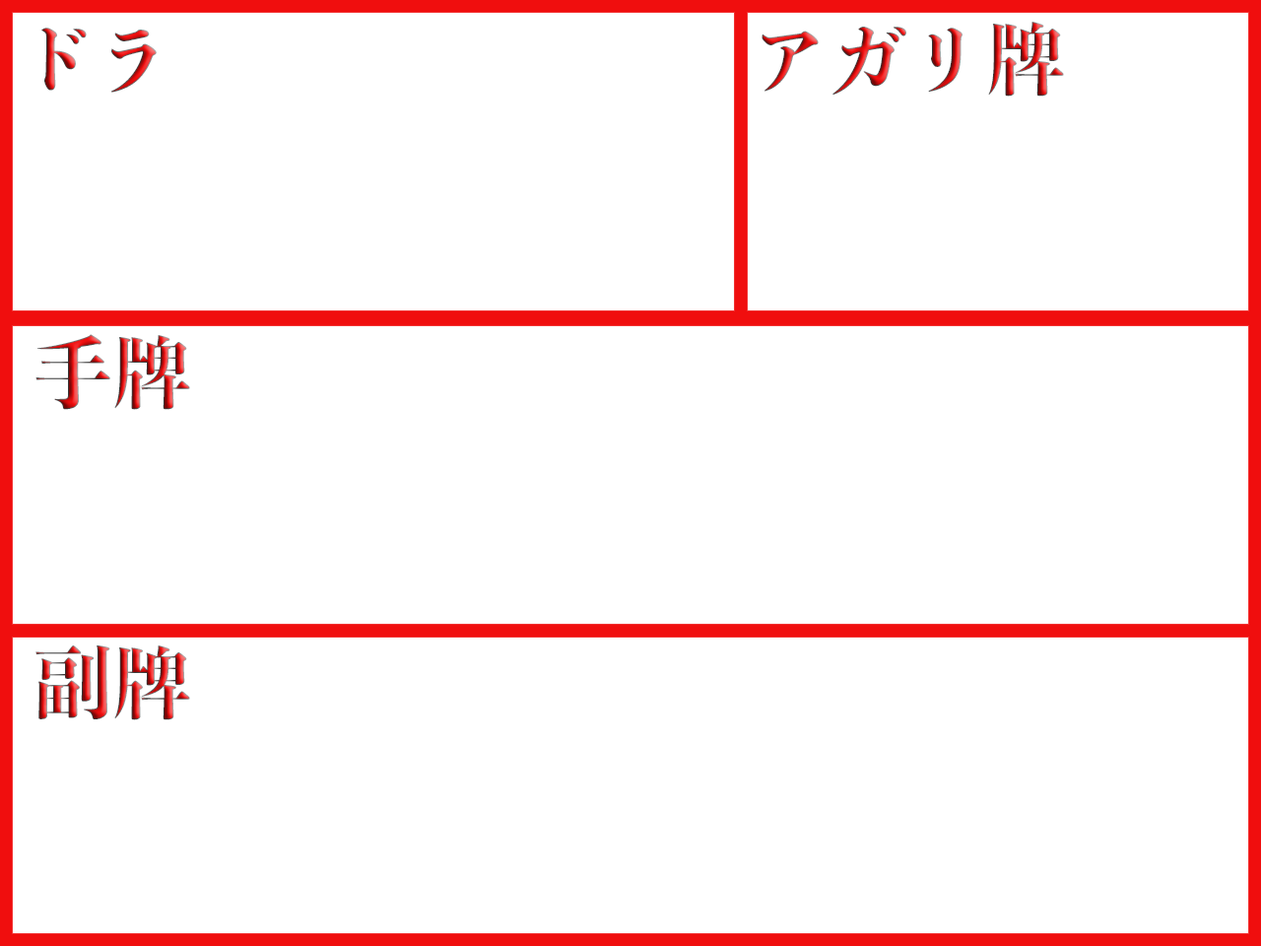
<style>
.page{position:relative;width:1261px;height:946px;background:#ffffff}
.page>*{position:absolute;margin:0}
.t1{font:78.8px "ToppanBunkyuMidashiMinchoStdN-ExtraBold"}
</style>
<div class="page">
<p class="t1" style="left:41px;top:28px;width:116px;height:65px">ドラ</p>
<p class="t1" style="left:761px;top:22px;width:303px;height:75px">アガリ牌</p>
<p class="t1" style="left:35px;top:334px;width:155px;height:76px">手牌</p>
<p class="t1" style="left:35px;top:645px;width:155px;height:75px">副牌</p>
</div>
